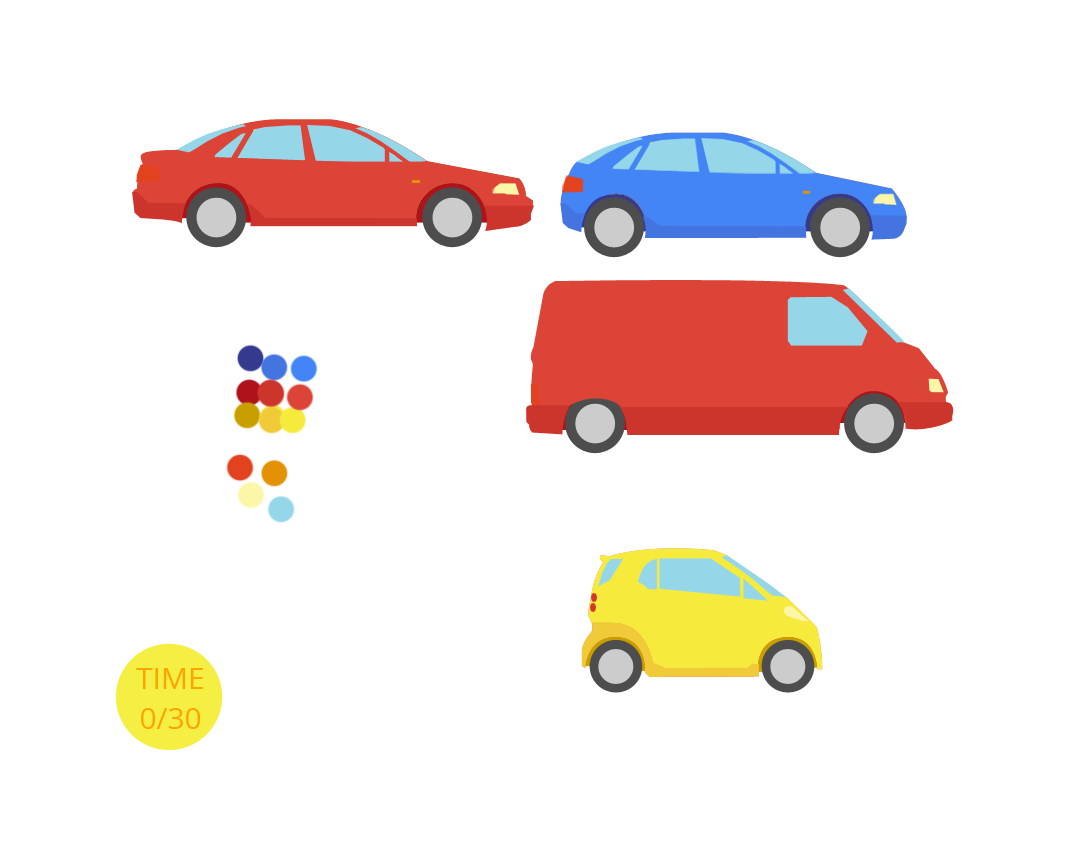
<style>
.page{position:relative;width:1068px;height:864px;background:#ffffff}
.page>*{position:absolute;margin:0}
.t1{font:30px/40px "OpenSans";color:#fba500}
</style>
<div class="page">
<p class="t1" style="left:136px;top:668px;width:67px;height:61px;text-align:center">TIME <br>0/30</p>
</div>
